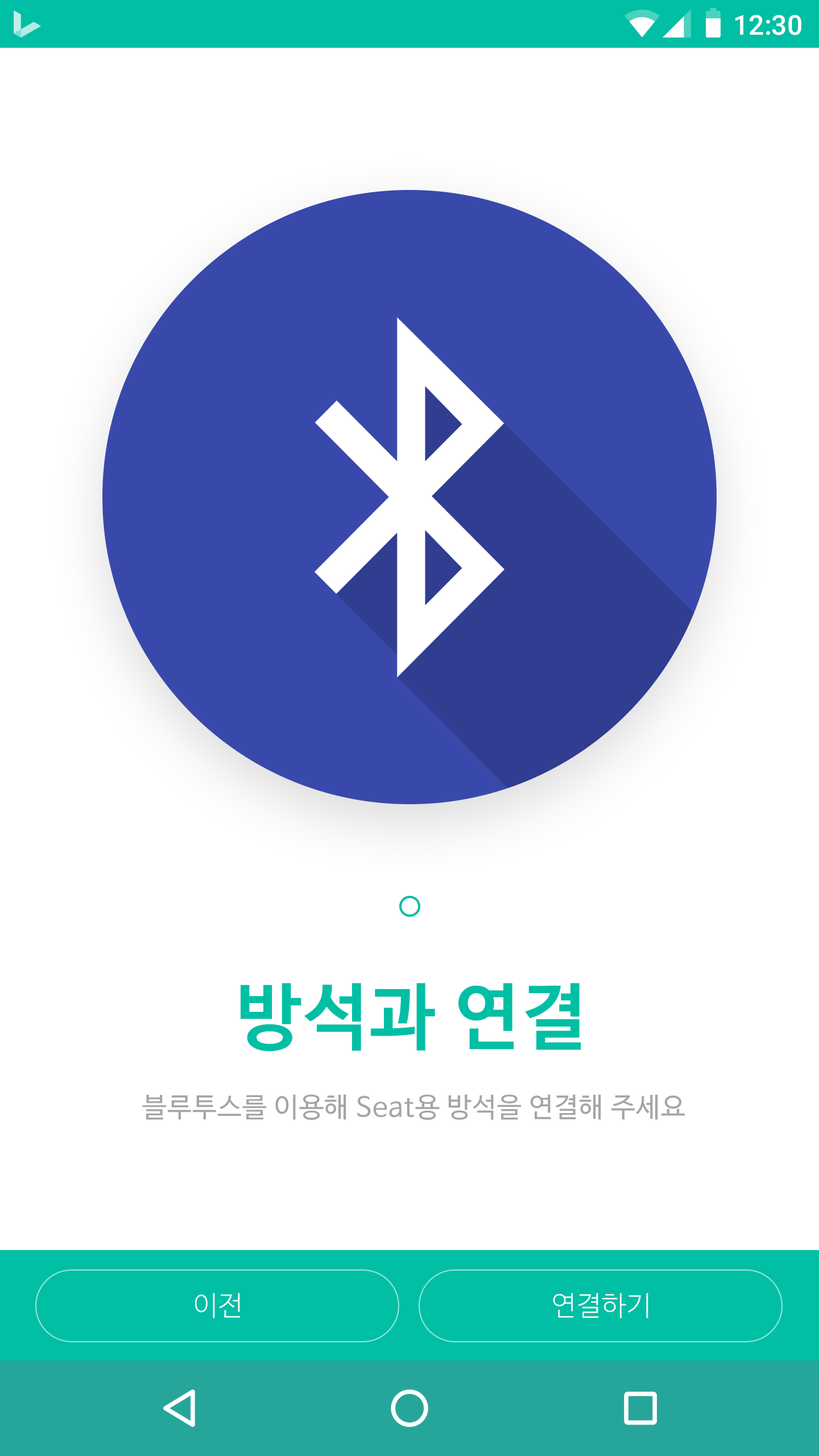
<style>
.page{position:relative;width:819px;height:1456px;background:#ffffff}
.page>*{position:absolute;margin:0}
.t1{font:27.3px "Roboto-Medium";color:#ffffff}
.t2{font:72.8px "NanumBarunGothicBold";letter-spacing:0.025em;color:#00bfa5}
.t3{font:27.3px "NanumBarunGothic";letter-spacing:0.025em;color:#a5a5a5}
.t4{font:27.3px "NanumBarunGothicLight";letter-spacing:0.025em;color:#fafafa}
</style>
<div class="page">
<p class="t1" style="left:735px;top:15px;width:66px;height:20px">12:30</p>
<p class="t2" style="left:241px;top:983px;width:340px;height:68px">방석과 연결</p>
<p class="t3" style="left:142px;top:1094px;width:543px;height:26px">블루투스를 이용해 Seat용 방석을 연결해 주세요</p>
<p class="t4" style="left:195px;top:1293px;width:45px;height:25px">이전</p>
<p class="t4" style="left:553px;top:1293px;width:95px;height:25px">연결하기</p>
</div>
